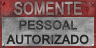
<style>
.page{position:relative;width:96px;height:48px}
.page>*{position:absolute;margin:0}
.t1{font:17px "ArialMT";font-weight:bold;scale:0.78 1}
.t2{font:12px "ArialMT";color:#242424;font-weight:bold}
</style>
<div class="page">
<p class="t1" style="left:14px;top:1px;width:68px;height:14px">SOMENTE</p>
<p class="t2" style="left:6px;top:20px;width:83px;height:25px;text-align:center">PESSOAL<br>AUTORIZADO</p>
</div>
